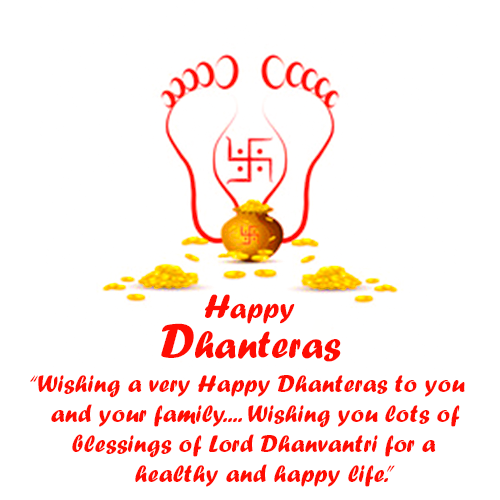
<style>
.page{position:relative;width:500px;height:500px;background:#ffffff}
.page>*{position:absolute;margin:0}
.t1{font:30px "ForteMT";color:#ff0403}
.t2{font:35px "ForteMT";color:#ff0403}
.t3{font:40px "ForteMT";color:#ff0403}
.t4{font:50px "ForteMT";color:#ff0403}
.t5{font:25px "ForteMT";color:#ff0403}
</style>
<div class="page">
<p class="t1" style="left:205px;top:294px;width:90px;height:30px"><span class="t2">H</span>appy</p>
<p class="t3" style="left:161px;top:323px;width:180px;height:39px"><span class="t4">D</span>hanteras</p>
<p class="t5" style="left:30px;top:375px;width:435px;height:112px">“Wishing a very Happy Dhanteras to you<br>   and your family.... Wishing you lots of <br>      blessings of Lord Dhanvantri for a<br>               healthy and happy life.”</p>
</div>
